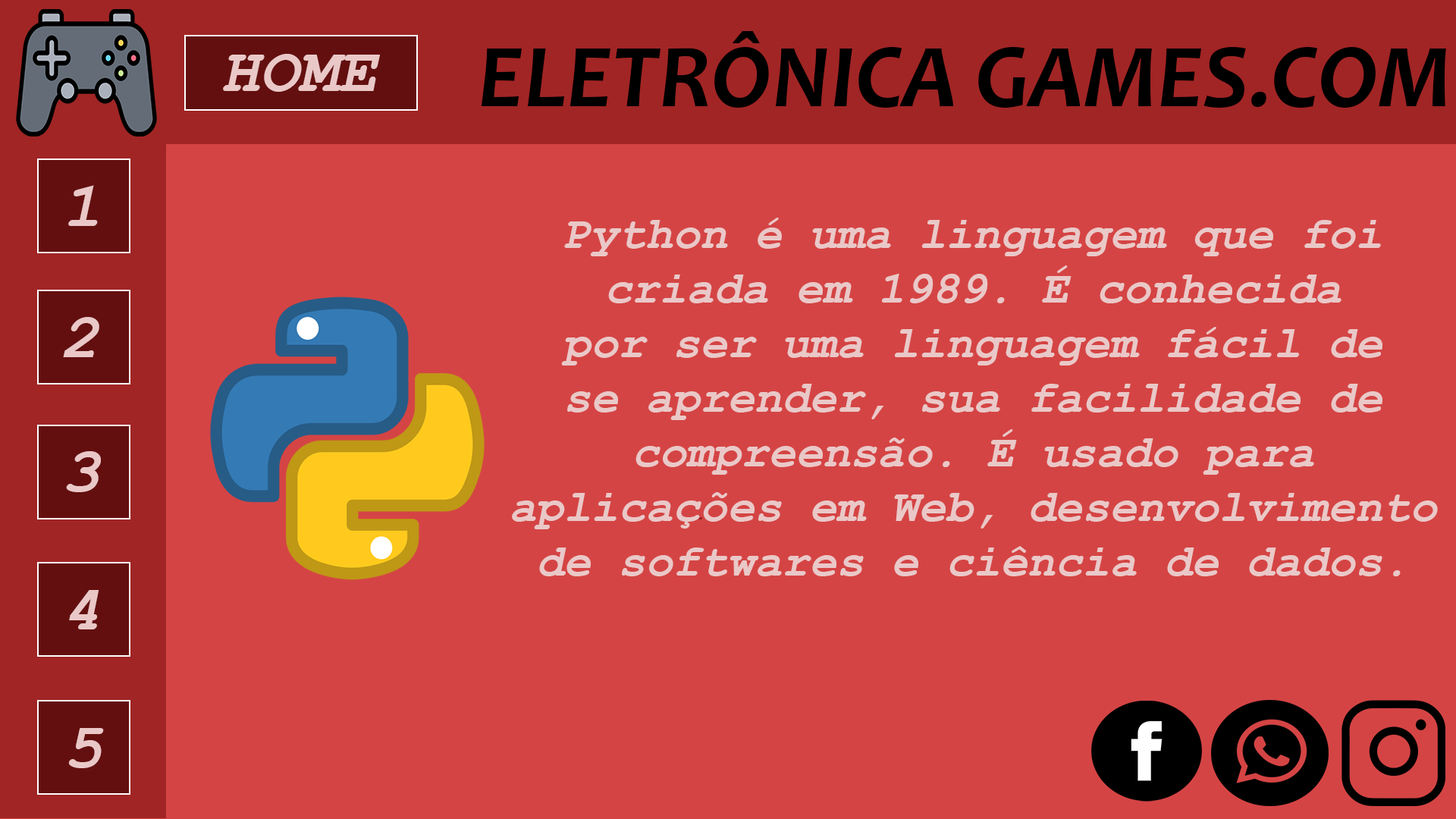
<style>
.page{position:relative;width:1456px;height:819px;background:#d54444}
.page>*{position:absolute;margin:0}
.t1{font:91px "Candara-BoldItalic";color:#000000}
.t2{font:64.5px "CourierNewPS-BoldItalicMT";color:#eac8c8}
.t3{font:45.5px "CourierNewPS-BoldItalicMT";color:#eac8c8}
</style>
<div class="page">
<p class="t1" style="left:481px;top:31px;width:965px;height:77px">ELETRÔNICA GAMES.COM</p>
<p class="t2" style="left:223px;top:54px;width:157px;height:38px">HOME</p>
<p class="t2" style="left:68px;top:185px;width:30px;height:41px">1</p>
<p class="t3" style="left:512px;top:218px;width:926px;height:358px;text-align:center">Python é uma linguagem que foi<br>criada em 1989. É conhecida<br>por ser uma linguagem fácil de<br>se aprender, sua facilidade de<br>compreensão. É usado para<br>aplicações em Web, desenvolvimento<br>de softwares e ciência de dados.</p>
<p class="t2" style="left:63px;top:317px;width:36px;height:40px">2</p>
<p class="t2" style="left:66px;top:451px;width:35px;height:41px">3</p>
<p class="t2" style="left:69px;top:590px;width:30px;height:39px">4</p>
<p class="t2" style="left:68px;top:728px;width:36px;height:40px">5</p>
</div>
